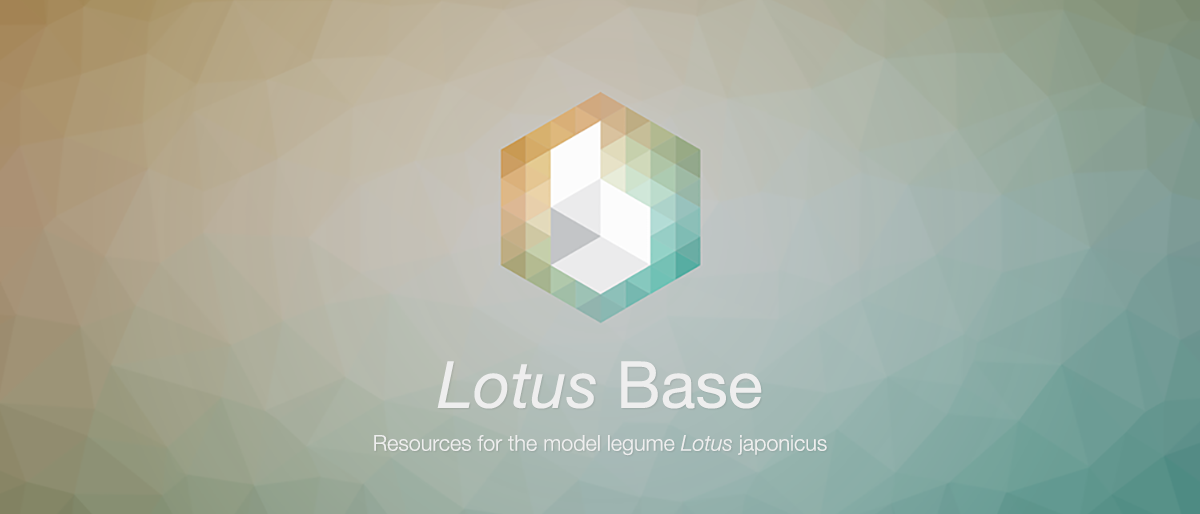
<style>
.page{position:relative;width:1200px;height:514px}
.page>*{position:absolute;margin:0}
.t1{font:21.6px/42.8px "HelveticaNeue-Light";color:#eeeeee}
.t2{font:64.9px/42.8px "HelveticaNeue-Italic";color:#eeeeee}
.t3{font:64.9px/42.8px "HelveticaNeue";color:#eeeeee}
.t4{font:21.6px/42.8px "HelveticaNeue-LightItalic";color:#eeeeee}
</style>
<div class="page">
<p class="t1" style="left:374px;top:361px;width:453px;height:95px;text-align:center"><span class="t2">Lotus</span><span class="t3"> Base<br></span>Resources for the model legume <span class="t4">Lotus</span> japonicus</p>
</div>
